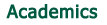
<style>
.page{position:relative;width:107px;height:25px;background:#ffffff}
.page>*{position:absolute;margin:0}
.t1{font:18px "Tahoma";letter-spacing:0.02em;color:#005941;font-weight:bold}
</style>
<div class="page">
<p class="t1" style="left:6px;top:4px;width:92px;height:15px">Academics</p>
</div>
